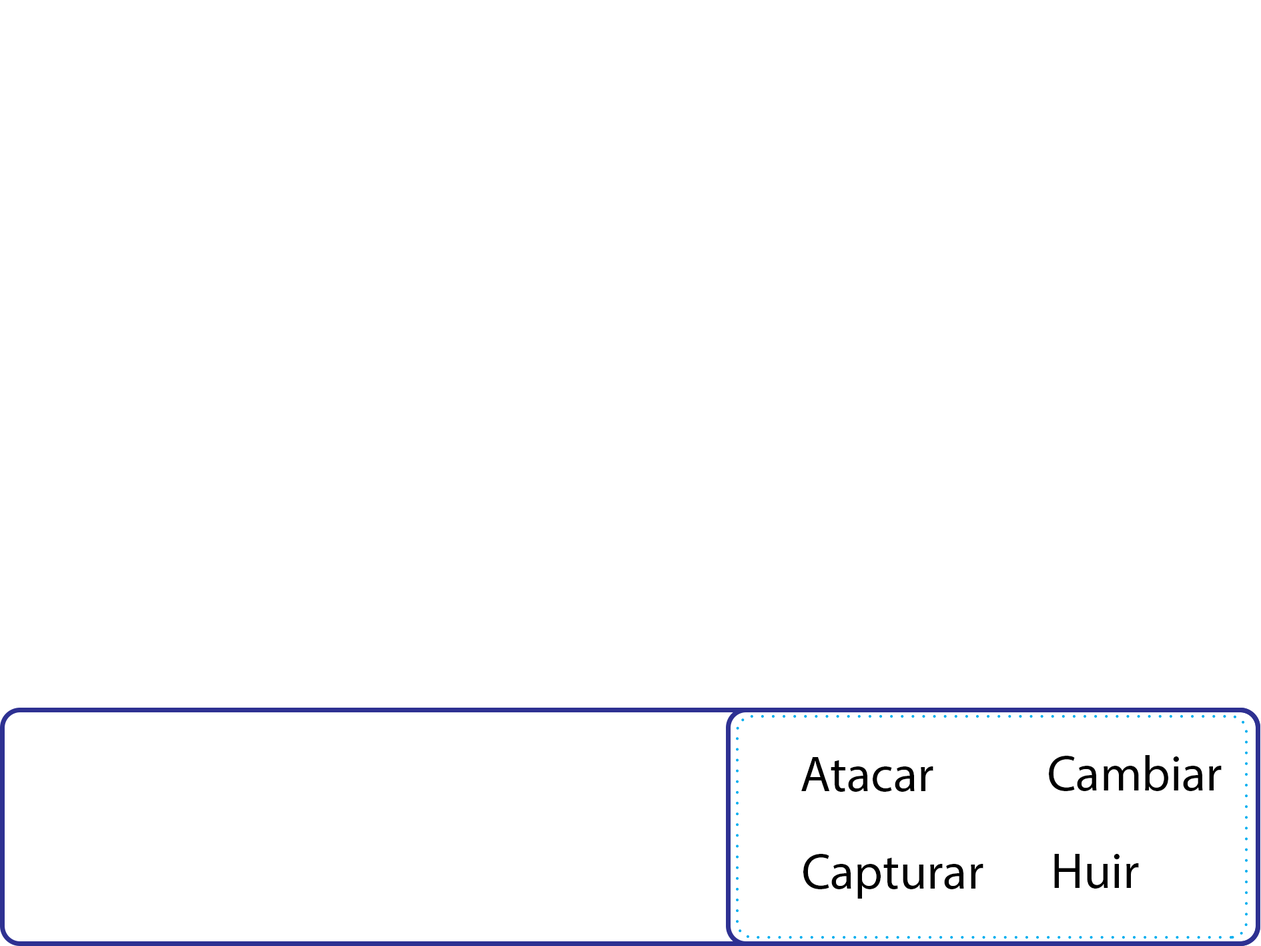
<style>
.page{position:relative;width:1261px;height:946px;background:#ffffff}
.page>*{position:absolute;margin:0}
.t1{font:50px "MyriadPro-Regular";color:#000000}
.t2{font:50px "MyriadPro-Regular";color:#010101}
</style>
<div class="page">
<p class="t1" style="left:801px;top:757px;width:133px;height:34px">Atacar</p>
<p class="t1" style="left:1049px;top:755px;width:173px;height:36px">Cambiar</p>
<p class="t2" style="left:803px;top:853px;width:181px;height:45px">Capturar</p>
<p class="t1" style="left:1054px;top:853px;width:85px;height:35px">Huir</p>
</div>
